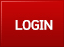
<style>
.page{position:relative;width:64px;height:47px}
.page>*{position:absolute;margin:0}
.t1{font:13px "HCRDotum-Bold";color:#ffffff}
</style>
<div class="page">
<p class="t1" style="left:15px;top:20px;width:38px;height:10px">LOGIN</p>
</div>
